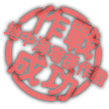
<style>
.page{position:relative;width:109px;height:109px;background:#ffffff}
.page>*{position:absolute;margin:0}
.t1{font:35px/24px "GothicMB101Pr6N-Medium";color:#ee7070;font-weight:bold}
</style>
<div class="page">
<p class="t1" style="left:7px;top:5px;width:93px;height:96px;text-align:center;rotate:27deg">做戰<br><br>成功</p>
</div>
